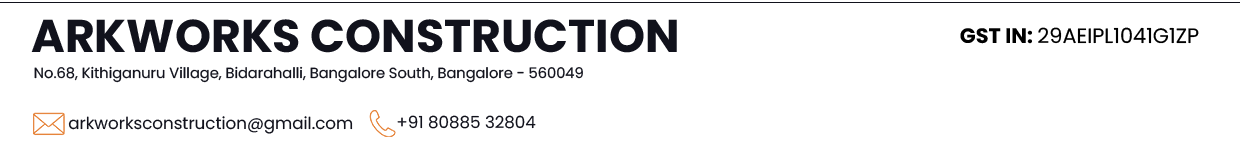
<style>
.page{position:relative;width:1240px;height:148px;background:#ffffff}
.page>*{position:absolute;margin:0}
.t1{font:45.8px "Poppins-Bold";color:#11121c}
.t2{font:20.8px "Poppins-Regular";color:#000000}
.t3{font:20.8px "Poppins-Bold";color:#000000}
.t4{font:14.6px "Poppins-Regular";color:#11121c}
.t5{font:16.7px "Poppins-Regular";color:#11121c}
</style>
<div class="page">
<p class="t1" style="left:31px;top:19px;width:646px;height:34px">ARKWORKS CONSTRUCTION</p>
<p class="t2" style="left:960px;top:27px;width:239px;height:17px"><span class="t3">GST IN: </span>29AEIPL1041G1ZP</p>
<p class="t4" style="left:34px;top:66px;width:549px;height:17px">No.68, Kithiganuru Village, Bidarahalli, Bangalore South, Bangalore - 560049</p>
<p class="t5" style="left:68px;top:116px;width:285px;height:18px">arkworksconstruction@gmail.com</p>
<p class="t5" style="left:397px;top:115px;width:139px;height:14px">+91 80885 32804</p>
</div>
